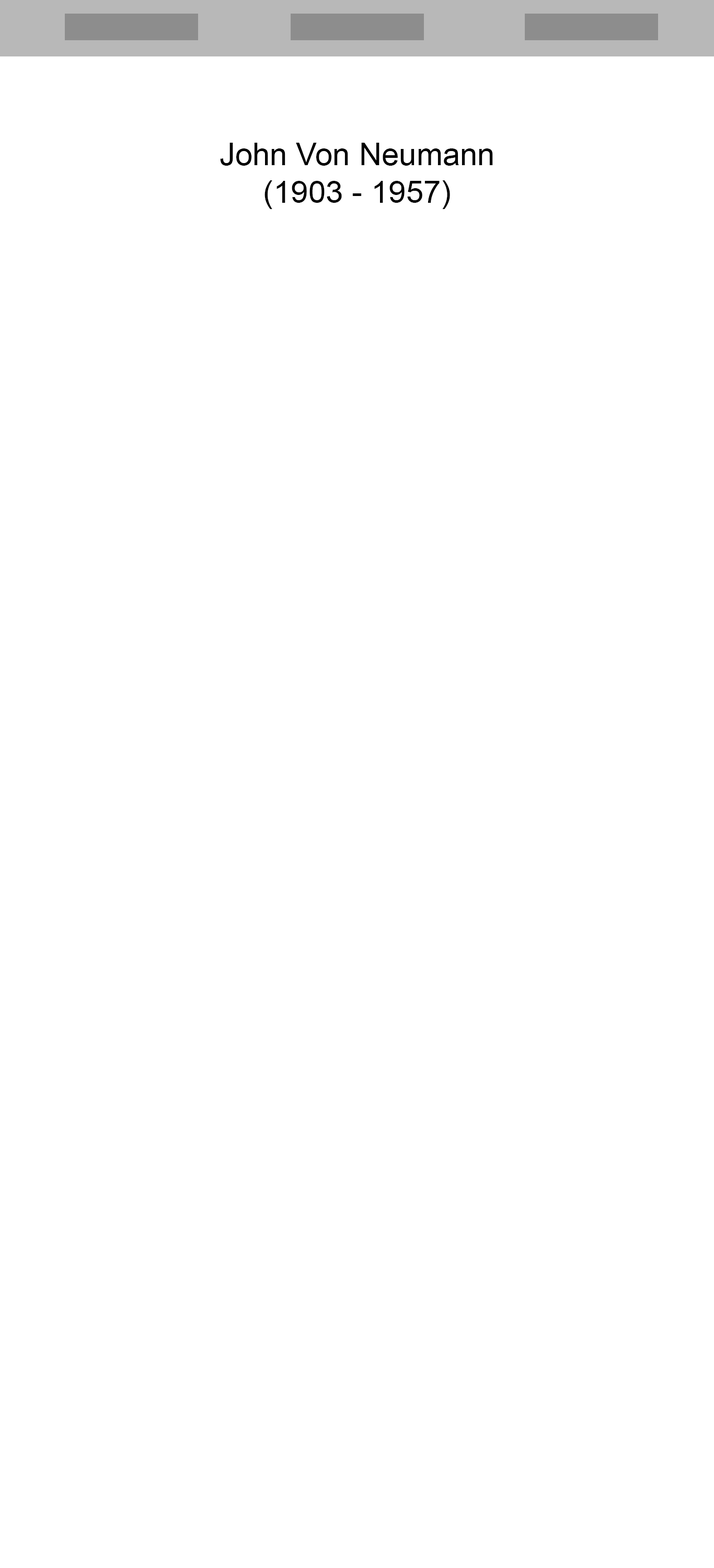
<style>
.page{position:relative;width:714px;height:1568px;background:#ffffff}
.page>*{position:absolute;margin:0}
.t1{font:31.4px "ArialMT";color:#000000}
</style>
<div class="page">
<p class="t1" style="left:220px;top:143px;width:273px;height:66px;text-align:center">John Von Neumann<br>(1903 - 1957)</p>
</div>
